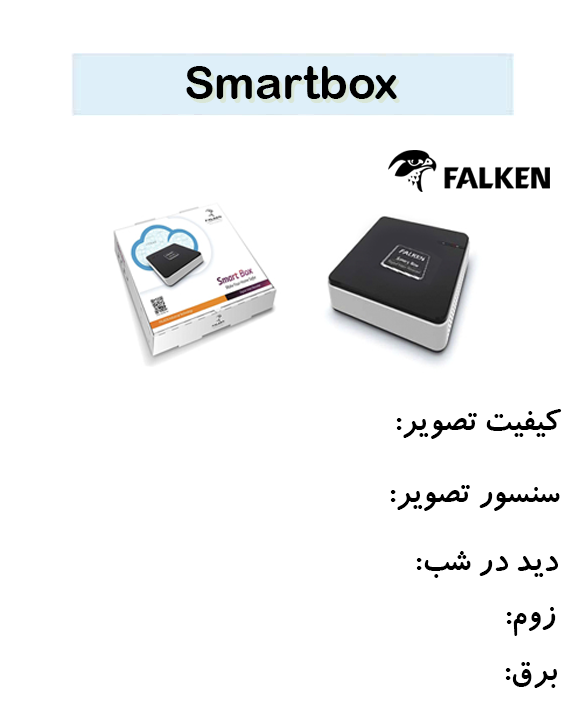
<style>
.page{position:relative;width:564px;height:701px;background:#ffffff}
.page>*{position:absolute;margin:0}
.t1{font:45.9px "ArialRoundedMTBold";color:#000000}
.t2{font:35.3px "BKoodakBold";color:#000000}
</style>
<div class="page">
<p class="t1" style="left:186px;top:66px;width:211px;height:33px">Smartbox</p>
<p class="t2" style="left:396px;top:409px;width:166px;height:30px">کیفیت تصویر:</p>
<p class="t2" style="left:390px;top:485px;width:170px;height:26px">سنسور تصویر:</p>
<p class="t2" style="left:416px;top:551px;width:142px;height:27px">دید در شب:</p>
<p class="t2" style="left:506px;top:607px;width:50px;height:29px">زوم:</p>
<p class="t2" style="left:505px;top:662px;width:52px;height:26px">برق:</p>
</div>
